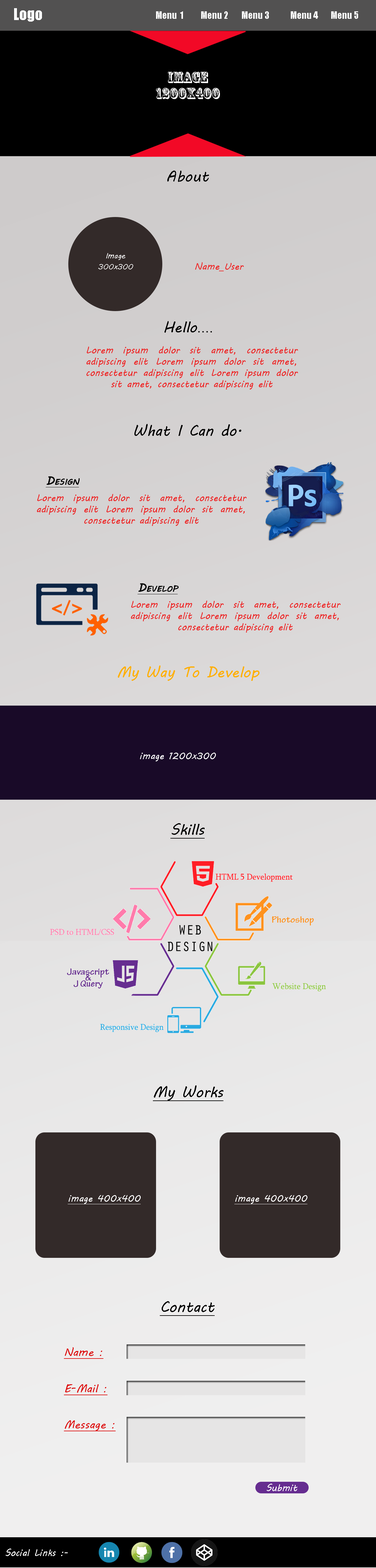
<style>
.page{position:relative;width:376px;height:1568px}
.page>*{position:absolute;margin:0}
.t1{font:15.1px "Impact";color:#ffffff}
.t2{font:9.4px "Impact";color:#ffffff}
.t3{font:15.1px "RosewoodStd-Regular";color:#ffffff}
.t4{font:15.1px "MVBoli";color:#000000}
.t5{font:7.5px "MVBoli";color:#ffffff}
.t6{font:7.5px "MVBoli";color:#fefefe}
.t7{font:9.4px "MVBoli";color:#ed2c2c}
.t8{font:15.1px "ArialMT";color:#000000}
.t9{font:9.4px/11.3px "MVBoli";color:#ed2c2c}
.t10{font:11.3px "MVBoli";color:#070707;font-variant:small-caps;font-weight:bold;text-decoration:underline}
.t11{font:15.1px "MVBoli";color:#ffaf03}
.t12{font:9.4px "MVBoli";color:#fcfcfc}
.t13{font:15.1px "MVBoli";color:#000000;text-decoration:underline}
.t14{font:9.4px "MVBoli";color:#ffffff;text-decoration:underline}
.t15{font:9.4px "MVBoli";color:#fffefe;text-decoration:underline}
.t16{font:11.3px "MVBoli";color:#dd1111;text-decoration:underline}
.t17{font:9.4px "MVBoli";color:#fefefe}
.t18{font:9.4px "MVBoli";color:#ffffff}
</style>
<div class="page">
<p class="t1" style="left:14px;top:8px;width:28px;height:14px">Logo</p>
<p class="t2" style="left:156px;top:11px;width:27px;height:8px">Menu  1</p>
<p class="t2" style="left:201px;top:11px;width:27px;height:8px">Menu 2</p>
<p class="t2" style="left:242px;top:11px;width:27px;height:8px">Menu 3</p>
<p class="t2" style="left:291px;top:11px;width:27px;height:8px">Menu 4</p>
<p class="t2" style="left:331px;top:11px;width:27px;height:8px">Menu 5</p>
<p class="t3" style="left:168px;top:72px;width:40px;height:11px">image</p>
<p class="t3" style="left:156px;top:88px;width:64px;height:11px">1200x400</p>
<p class="t4" style="left:167px;top:171px;width:42px;height:11px">About</p>
<p class="t5" style="left:106px;top:253px;width:19px;height:7px">Image</p>
<p class="t6" style="left:98px;top:264px;width:35px;height:5px">300x300</p>
<p class="t7" style="left:195px;top:262px;width:49px;height:9px">Name_User</p>
<p class="t4" style="left:165px;top:321px;width:47px;height:12px">Hello<span class="t8">....</span></p>
<p class="t9" style="left:87px;top:346px;width:211px;height:43px;text-align:justify">Lorem ipsum dolor sit amet, consectetur adipiscing elit Lorem ipsum dolor sit amet, consectetur adipiscing elit Lorem ipsum dolor sit amet, consectetur adipiscing elit</p>
<p class="t4" style="left:135px;top:424px;width:106px;height:12px">What I Can do.</p>
<p class="t10" style="left:46px;top:476px;width:34px;height:11px">Design</p>
<p class="t9" style="left:37px;top:494px;width:210px;height:32px;text-align:justify">Lorem ipsum dolor sit amet, consectetur adipiscing elit Lorem ipsum dolor sit amet, consectetur adipiscing elit</p>
<p class="t10" style="left:138px;top:583px;width:41px;height:11px">Develop</p>
<p class="t9" style="left:131px;top:601px;width:210px;height:32px;text-align:justify">Lorem ipsum dolor sit amet, consectetur adipiscing elit Lorem ipsum dolor sit amet, consectetur adipiscing elit</p>
<p class="t11" style="left:118px;top:665px;width:142px;height:16px">My Way To Develop</p>
<p class="t12" style="left:140px;top:753px;width:76px;height:8px">image 1200x300</p>
<p class="t13" style="left:171px;top:823px;width:34px;height:16px">Skills</p>
<p class="t13" style="left:153px;top:1085px;width:71px;height:16px">My Works</p>
<p class="t14" style="left:68px;top:1195px;width:73px;height:9px">image 400x400</p>
<p class="t15" style="left:235px;top:1195px;width:73px;height:9px">image 400x400</p>
<p class="t13" style="left:160px;top:1301px;width:55px;height:15px">Contact</p>
<p class="t16" style="left:64px;top:1347px;width:39px;height:12px">Name :</p>
<p class="t16" style="left:64px;top:1384px;width:44px;height:11px">E-Mail :</p>
<p class="t16" style="left:64px;top:1420px;width:52px;height:11px">Message :</p>
<p class="t17" style="left:267px;top:1484px;width:31px;height:7px">Submit</p>
<p class="t18" style="left:6px;top:1549px;width:62px;height:7px">Social Links :-</p>
</div>
